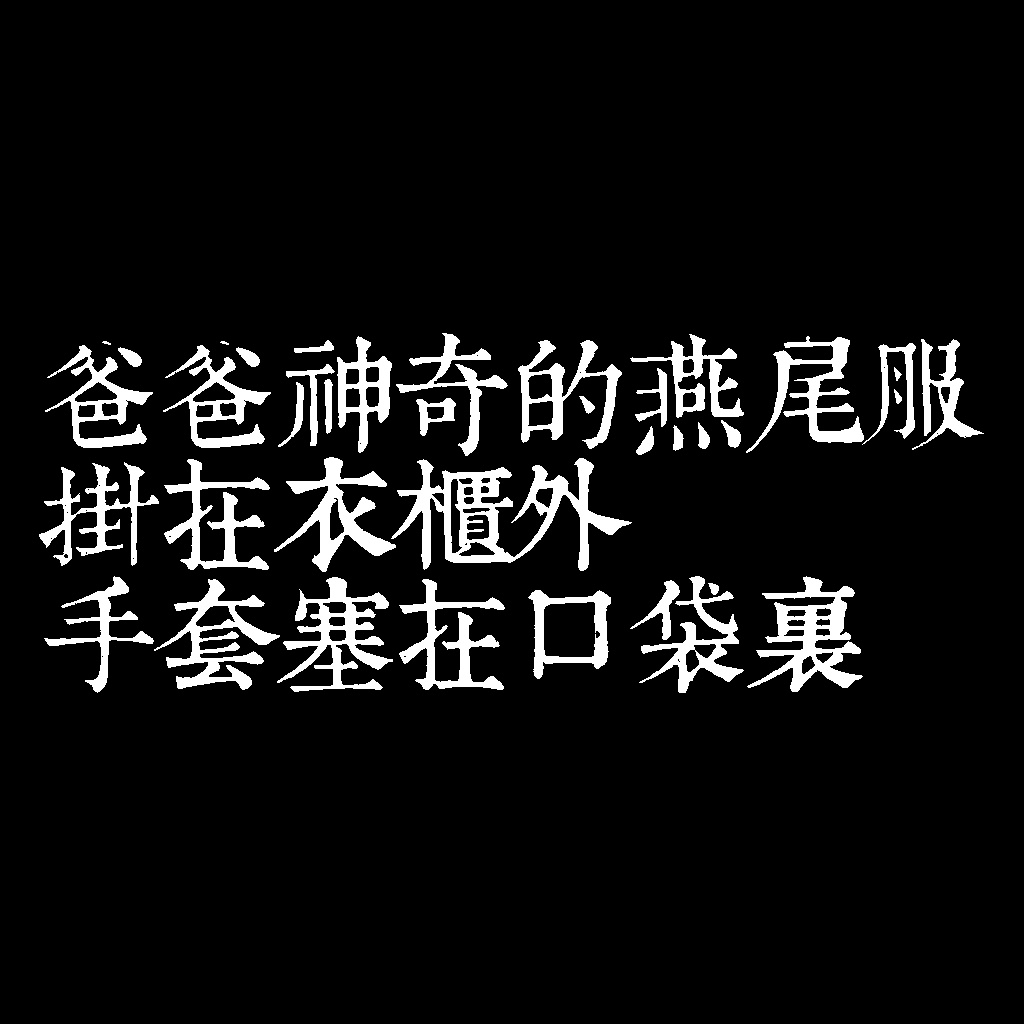
<style>
.page{position:relative;width:1024px;height:1024px;background:#000000}
.page>*{position:absolute;margin:0}
.t1{font:120px/120px "TpldKhangXiDictTrial";letter-spacing:-0.02em;color:#ffffff}
</style>
<div class="page">
<p class="t1" style="left:39px;top:333px;width:945px;height:360px">爸爸神奇的燕尾服<br>掛在衣櫃外<br>手套塞在口袋裏</p>
</div>
